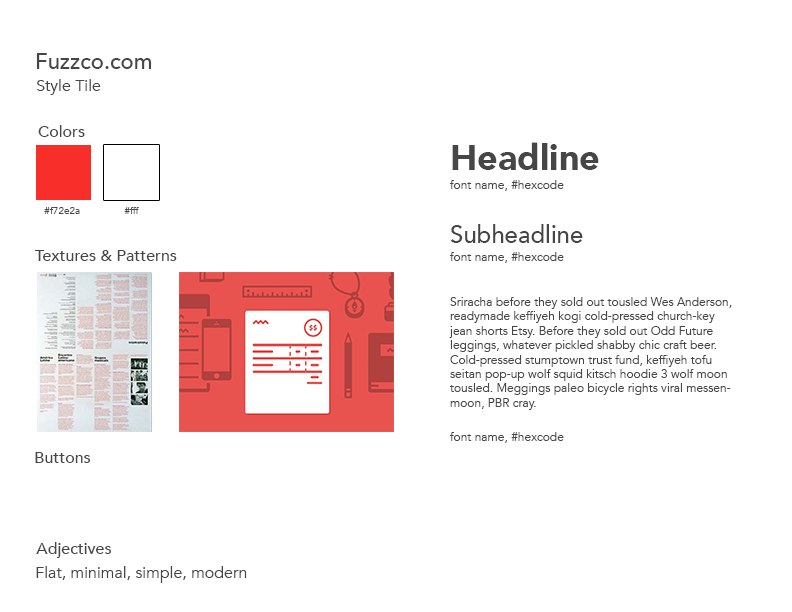
<style>
.page{position:relative;width:792px;height:612px;background:#ffffff}
.page>*{position:absolute;margin:0}
.t1{font:22px "Avenir-Medium";color:#464646}
.t2{font:16px "Avenir-Book";color:#464646}
.t3{font:16px "Avenir-Medium";color:#464646}
.t4{font:36px "Avenir-Black";color:#464646}
.t5{font:12px "Avenir-Book";color:#464646}
.t6{font:10px "Avenir-Book";color:#464646}
.t7{font:24px "Avenir-Medium";color:#464646}
</style>
<div class="page">
<p class="t1" style="left:36px;top:53px;width:116px;height:16px">Fuzzco.com</p>
<p class="t2" style="left:36px;top:79px;width:65px;height:16px">Style Tile</p>
<p class="t3" style="left:38px;top:125px;width:47px;height:12px">Colors</p>
<p class="t4" style="left:452px;top:142px;width:147px;height:28px">Headline</p>
<p class="t5" style="left:450px;top:180px;width:114px;height:11px">font name, #hexcode</p>
<p class="t6" style="left:44px;top:207px;width:36px;height:7px">#f72e2a</p>
<p class="t6" style="left:124px;top:207px;width:15px;height:7px">#fff</p>
<p class="t7" style="left:450px;top:224px;width:133px;height:19px">Subheadline</p>
<p class="t3" style="left:35px;top:250px;width:142px;height:11px">Textures &amp; Patterns</p>
<p class="t5" style="left:450px;top:252px;width:114px;height:11px">font name, #hexcode</p>
<p class="t5" style="left:449px;top:297px;width:283px;height:113px">Sriracha before they sold out tousled Wes Anderson, readymade keffiyeh kogi cold-pressed church-key jean shorts Etsy. Before they sold out Odd Future leggings, whatever pickled shabby chic craft beer. Cold-pressed stumptown trust fund, keffiyeh tofu seitan pop-up wolf squid kitsch hoodie 3 wolf moon tousled. Meggings paleo bicycle rights viral messenmoon, PBR cray.</p>
<p class="t5" style="left:450px;top:432px;width:114px;height:11px">font name, #hexcode</p>
<p class="t3" style="left:35px;top:452px;width:55px;height:11px">Buttons</p>
<p class="t3" style="left:36px;top:542px;width:75px;height:16px">Adjectives</p>
<p class="t2" style="left:36px;top:566px;width:211px;height:17px">Flat, minimal, simple, modern</p>
</div>
